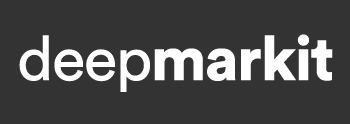
<style>
.page{position:relative;width:350px;height:124px;background:#333333}
.page>*{position:absolute;margin:0}
.t1{font:61.7px "CircularStd-Black";letter-spacing:-0.025em;color:#ffffff}
.t2{font:61.7px "CircularStd-Book";letter-spacing:-0.025em;color:#ffffff}
</style>
<div class="page">
<p class="t1" style="left:19px;top:34px;width:314px;height:58px"><span class="t2">deep</span>markit</p>
</div>
